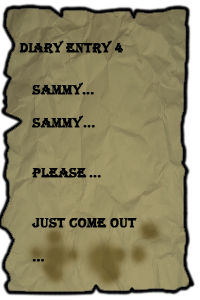
<style>
.page{position:relative;width:200px;height:300px}
.page>*{position:absolute;margin:0}
.t1{font:13.9px "Algerian";color:#000000;font-weight:bold}
</style>
<div class="page">
<p class="t1" style="left:19px;top:40px;width:104px;height:14px">Diary Entry 4</p>
<p class="t1" style="left:32px;top:82px;width:105px;height:180px;text-align:right">sammy<br><br>sammy<br><br><br>please<br><br><br>just come out<br><br>...</p>
<p class="t1" style="left:82px;top:92px;width:12px;height:3px">...</p>
<p class="t1" style="left:83px;top:125px;width:12px;height:3px">...</p>
<p class="t1" style="left:89px;top:175px;width:12px;height:3px">...</p>
</div>
